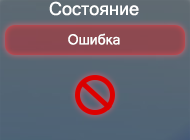
<style>
.page{position:relative;width:190px;height:140px}
.page>*{position:absolute;margin:0}
.t1{font:18px "MicrosoftSansSerif";color:#ffffff}
.t2{font:14px "MicrosoftSansSerif";color:#ffffff}
</style>
<div class="page">
<p class="t1" style="left:49px;top:1px;width:90px;height:15px">Состояние</p>
<p class="t2" style="left:68px;top:33px;width:52px;height:12px">Ошибка</p>
</div>
